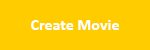
<style>
.page{position:relative;width:150px;height:50px;background:#ffcc00}
.page>*{position:absolute;margin:0}
.t1{font:16px "Calibri-Bold";color:#ffffff}
</style>
<div class="page">
<p class="t1" style="left:31px;top:20px;width:88px;height:10px">Create Movie</p>
</div>
